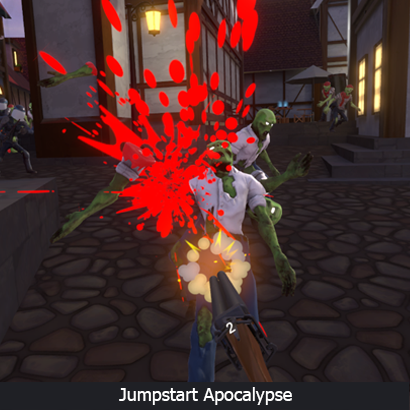
<style>
.page{position:relative;width:410px;height:410px}
.page>*{position:absolute;margin:0}
.t1{font:18px "Tahoma";color:#ffffff}
</style>
<div class="page">
<p class="t1" style="left:119px;top:387px;width:173px;height:18px">Jumpstart Apocalypse</p>
</div>
